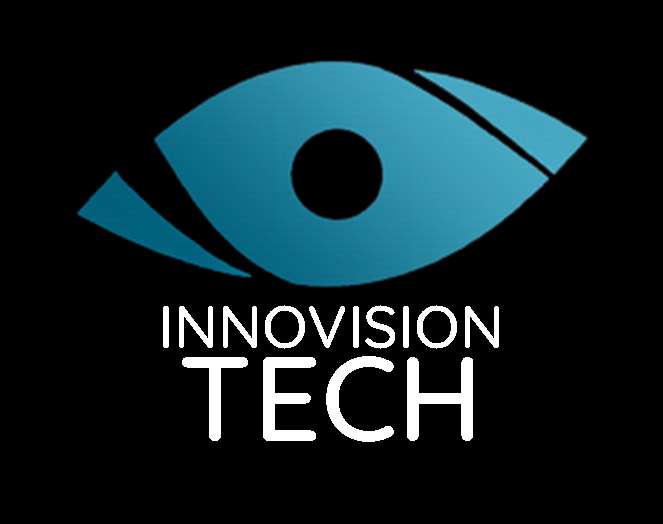
<style>
.page{position:relative;width:663px;height:524px;background:#000000}
.page>*{position:absolute;margin:0}
.t1{font:60px/112px "Quicksand-Medium";color:#ffffff}
.t2{font:120px/112px "Quicksand-Medium";color:#ffffff}
</style>
<div class="page">
<p class="t1" style="left:163px;top:305px;width:336px;height:137px;text-align:center">INNOVISION<br><span class="t2">TECH</span></p>
</div>
